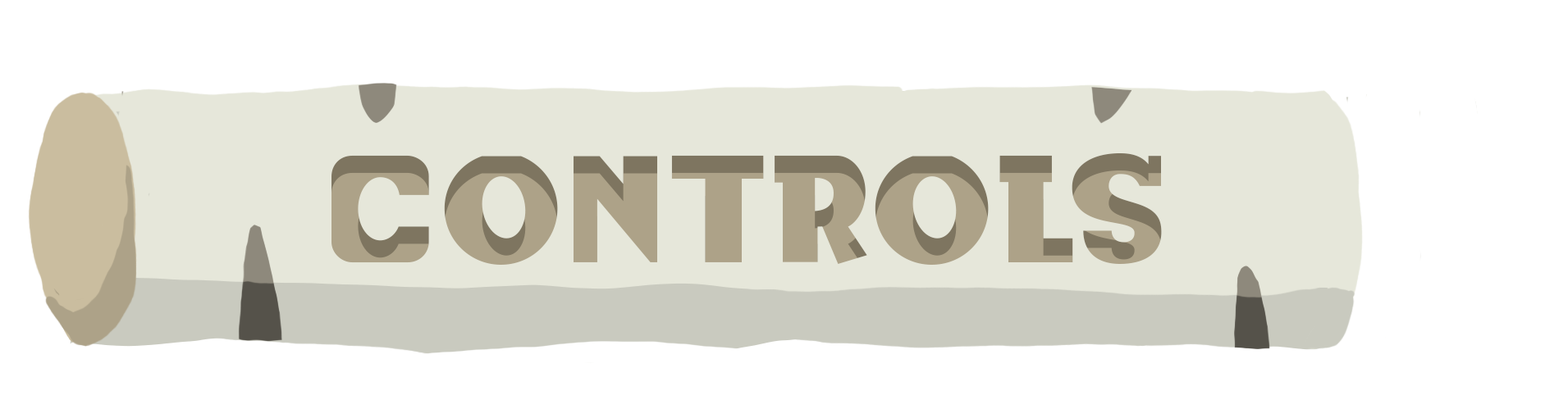
<style>
.page{position:relative;width:1568px;height:409px;background:#ffffff}
.page>*{position:absolute;margin:0}
.t1{font:148px "BadTyp-Regular";color:#ada288}
</style>
<div class="page">
<p class="t1" style="left:331px;top:153px;width:831px;height:112px">Controls</p>
</div>
